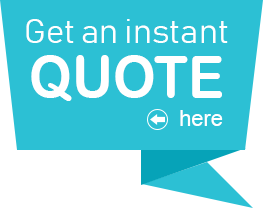
<style>
.page{position:relative;width:263px;height:210px;background:#2cc0d4}
.page>*{position:absolute;margin:0}
.t1{font:34px "Bahnschrift-Light";color:#ffffff}
.t2{font:59.1px "ArialRoundedMTBold";color:#ffffff;scale:0.92 1}
.t3{font:21.9px "ArialMT";color:#ffffff}
</style>
<div class="page">
<p class="t1" style="left:26px;top:19px;width:202px;height:24px">Get an instant</p>
<p class="t2" style="left:31px;top:55px;width:191px;height:46px">QUOTE</p>
<p class="t3" style="left:180px;top:110px;width:43px;height:16px">here</p>
</div>
